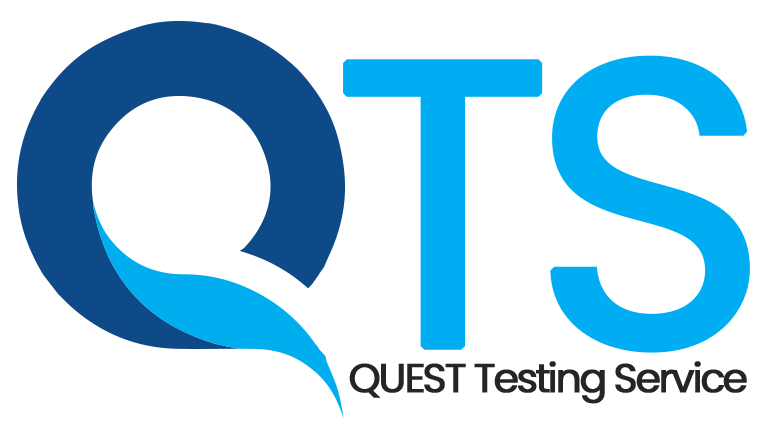
<style>
.page{position:relative;width:778px;height:429px;background:#ffffff}
.page>*{position:absolute;margin:0}
.t1{font:406px "Poppins-Regular";letter-spacing:-0.08em;color:#01adf2;text-transform:uppercase;font-weight:bold}
.t2{font:40.4px "Poppins-Regular";letter-spacing:-0.08em;color:#252525;font-weight:bold}
</style>
<div class="page">
<p class="t1" style="left:343px;top:55px;width:407px;height:298px">TS</p>
<p class="t2" style="left:349px;top:361px;width:398px;height:43px">QUEST Testing Service</p>
</div>
